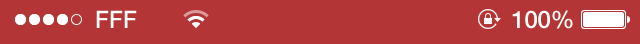
<style>
.page{position:relative;width:640px;height:44px;background:#b33535}
.page>*{position:absolute;margin:0}
.t1{font:24px "HelveticaNeue-Medium";color:#ffffff}
</style>
<div class="page">
<p class="t1" style="left:96px;top:10px;width:41px;height:18px">FFF</p>
<p class="t1" style="left:512px;top:10px;width:61px;height:19px">100%</p>
</div>
